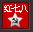
<style>
.page{position:relative;width:33px;height:32px;background:#c50000}
.page>*{position:absolute;margin:0}
.t1{font:10.4px "SimSun";letter-spacing:-0.25em;color:#ffffff}
</style>
<div class="page">
<p class="t1" style="left:4px;top:4px;width:24px;height:9px">红七八</p>
</div>
